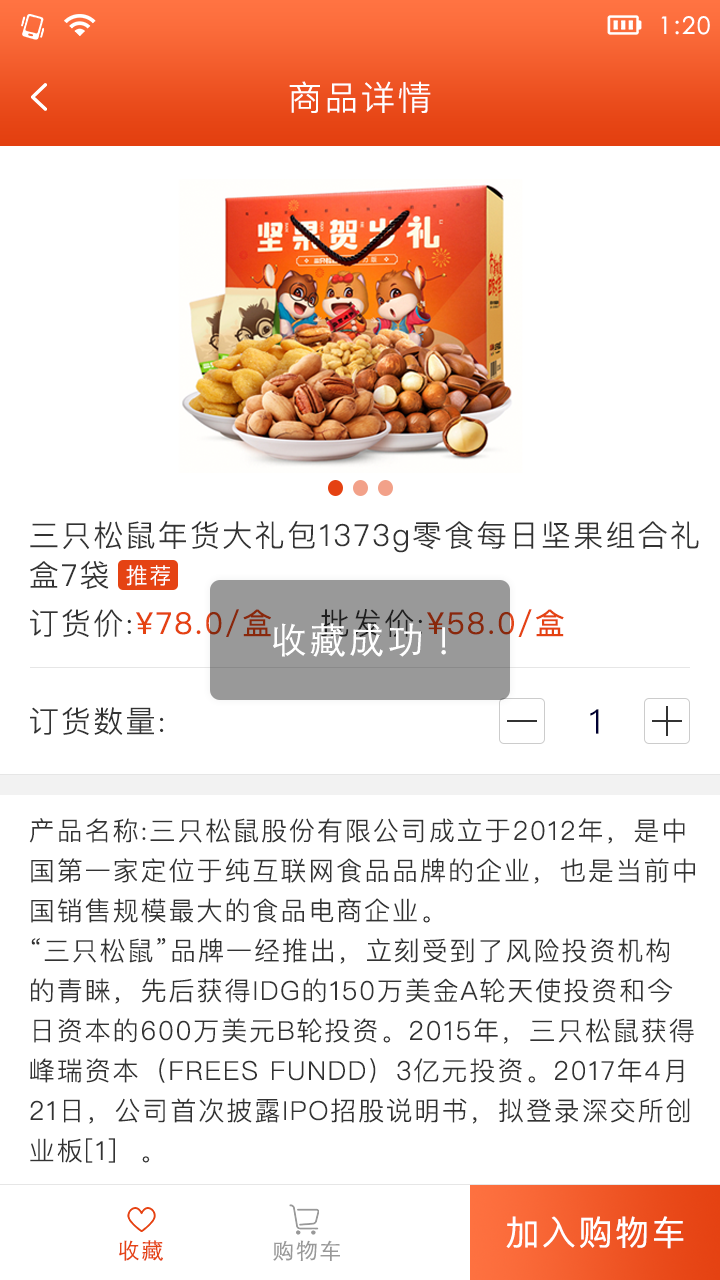
<style>
.page{position:relative;width:720px;height:1280px;background:#ffffff}
.page>*{position:absolute;margin:0}
.t1{font:24px "STXihei";letter-spacing:0.075em;color:#ffffff}
.t2{font:34px "PingFangSC-Light";letter-spacing:0.075em;color:#ffffff}
.t3{font:30px/40px "PingFangSC-Light";letter-spacing:0.075em;color:#333333}
.t4{font:22px "PingFangSC-Light";letter-spacing:0.075em;color:#ffffff}
.t5{font:30px "PingFangSC-Regular";letter-spacing:0.075em;color:#e54212}
.t6{font:30px "PingFangSC-Light";letter-spacing:0.075em;color:#333333}
.t7{font:30px "PingFangSC-Regular";letter-spacing:0.075em}
.t8{font:30px "PingFangSC-Light";letter-spacing:0.075em}
.t9{font:36px "STHeitiSC-Light";letter-spacing:0.075em;color:#ffffff}
.t10{font:34px "PingFangSC-Light";letter-spacing:0.075em;color:#000033}
.t11{font:26px/40px "PingFangSC-Light";letter-spacing:0.075em;color:#333333}
.t12{font:34px "PingFangSC-Regular";letter-spacing:0.075em;color:#ffffff}
.t13{font:22px "STHeitiSC-Light";letter-spacing:0.075em;color:#e54313}
.t14{font:22px "STHeitiSC-Light";letter-spacing:0.075em;color:#999999}
</style>
<div class="page">
<p class="t1" style="left:661px;top:16px;width:49px;height:19px">1:20</p>
<p class="t2" style="left:289px;top:81px;width:142px;height:32px">商品详情</p>
<p class="t3" style="left:30px;top:521px;width:669px;height:68px">三只松鼠年货大礼包1373g零食每日坚果组合礼<br>盒7袋</p>
<p class="t4" style="left:126px;top:565px;width:44px;height:21px">推荐</p>
<p class="t5" style="left:30px;top:609px;width:241px;height:28px"><span class="t6">订货价:</span>¥78.0/盒</p>
<p class="t7" style="left:321px;top:609px;width:243px;height:28px"><span class="t8">批发价:</span>¥58.0/盒</p>
<p class="t9" style="left:273px;top:623px;width:149px;height:34px">收藏成功</p>
<p class="t9" style="left:441px;top:627px;width:5px;height:28px">!</p>
<p class="t6" style="left:30px;top:707px;width:134px;height:28px">订货数量:</p>
<p class="t10" style="left:590px;top:709px;width:9px;height:25px">1</p>
<p class="t11" style="left:29px;top:818px;width:666px;height:345px">产品名称:三只松鼠股份有限公司成立于2012年，是中<br>国第一家定位于纯互联网食品品牌的企业，也是当前中<br>国销售规模最大的食品电商企业。<br>“三只松鼠”品牌一经推出，立刻受到了风险投资机构<br>的青睐，先后获得IDG的150万美金A轮天使投资和今<br>日资本的600万美元B轮投资。2015年，三只松鼠获得<br>峰瑞资本（FREES FUNDD）3亿元投资。2017年4月<br>21日，公司首次披露IPO招股说明书，拟登录深交所创<br>业板[1]  。</p>
<p class="t12" style="left:506px;top:1216px;width:178px;height:33px">加入购物车</p>
<p class="t13" style="left:119px;top:1240px;width:44px;height:21px">收藏</p>
<p class="t14" style="left:273px;top:1240px;width:67px;height:21px">购物车</p>
</div>
